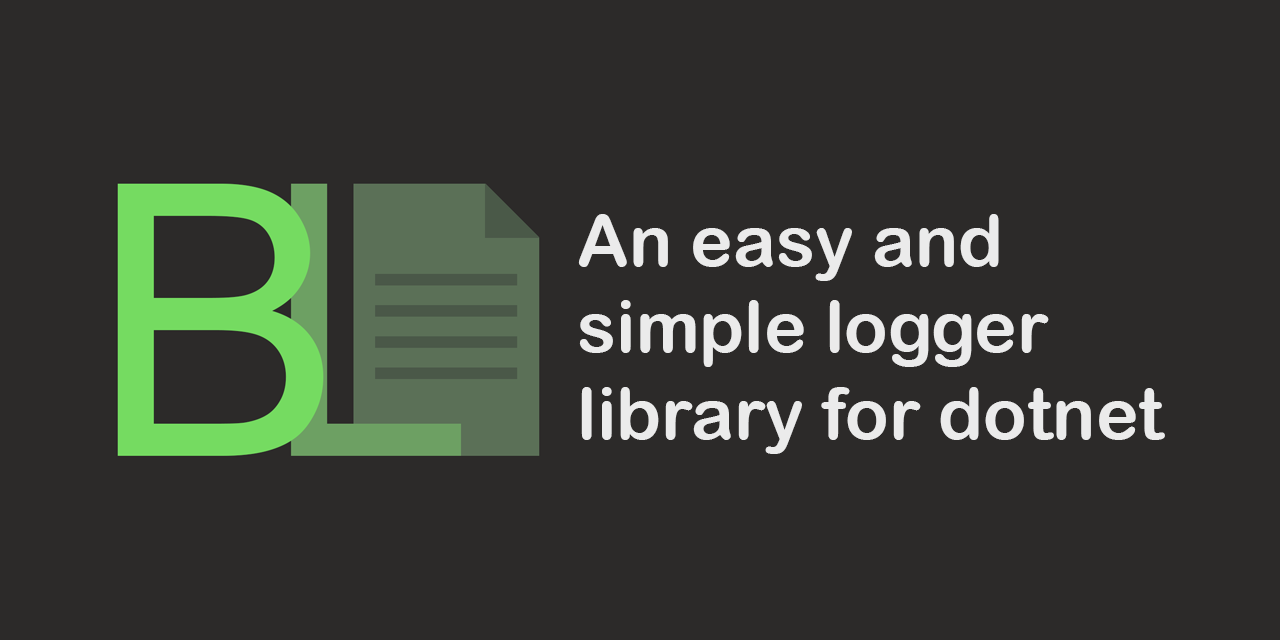
<style>
.page{position:relative;width:1280px;height:640px;background:#2c2a29}
.page>*{position:absolute;margin:0}
.t1{font:72px "ArialRoundedMTBold";color:#ebebeb}
</style>
<div class="page">
<p class="t1" style="left:578px;top:214px;width:587px;height:240px">An easy and<br>simple logger <br>library for dotnet</p>
</div>
